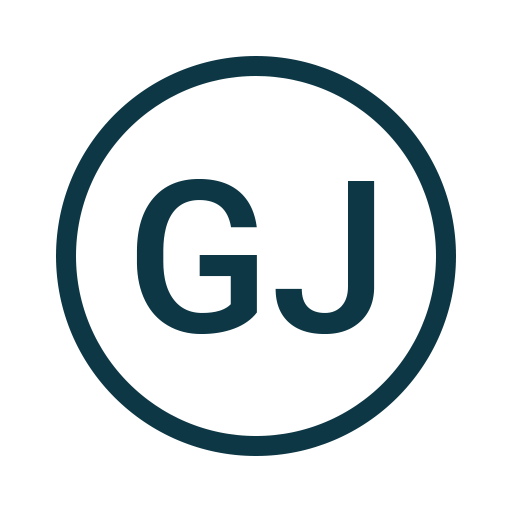
<style>
.page{position:relative;width:512px;height:512px;background:#ffffff}
.page>*{position:absolute;margin:0}
.t1{font:212px "Roboto-Medium";color:#0d3745}
</style>
<div class="page">
<p class="t1" style="left:136px;top:179px;width:239px;height:155px">GJ</p>
</div>
